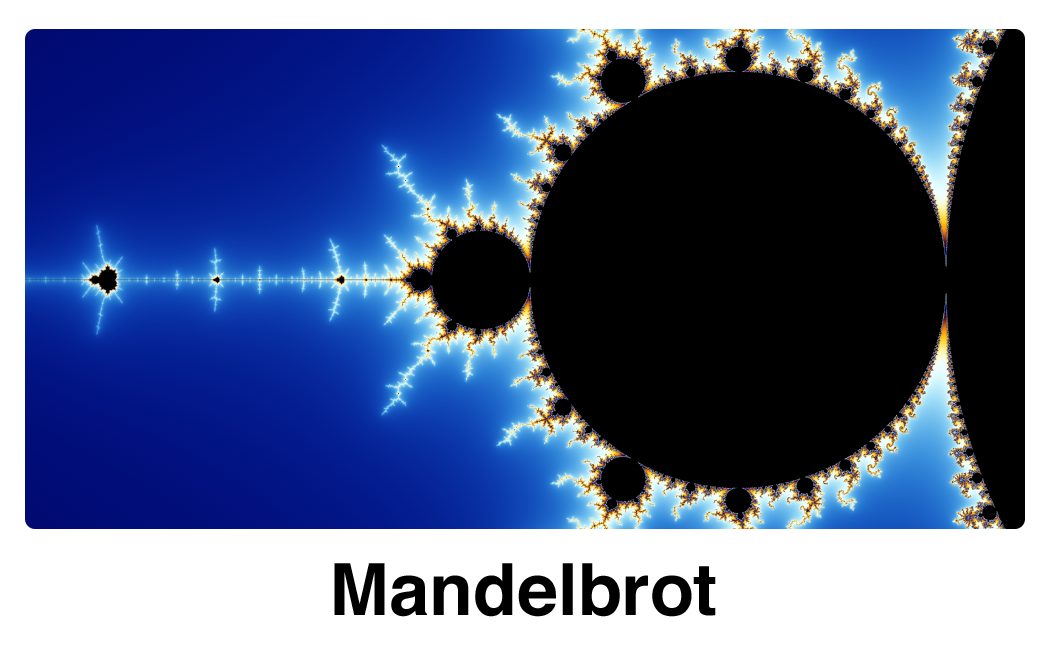
<style>
.page{position:relative;width:1050px;height:650px;background:#ffffff}
.page>*{position:absolute;margin:0}
.t1{font:72px "Helvetica-Bold";color:#000000}
</style>
<div class="page">
<p class="t1" style="left:334px;top:563px;width:382px;height:54px">Mandelbrot</p>
</div>
